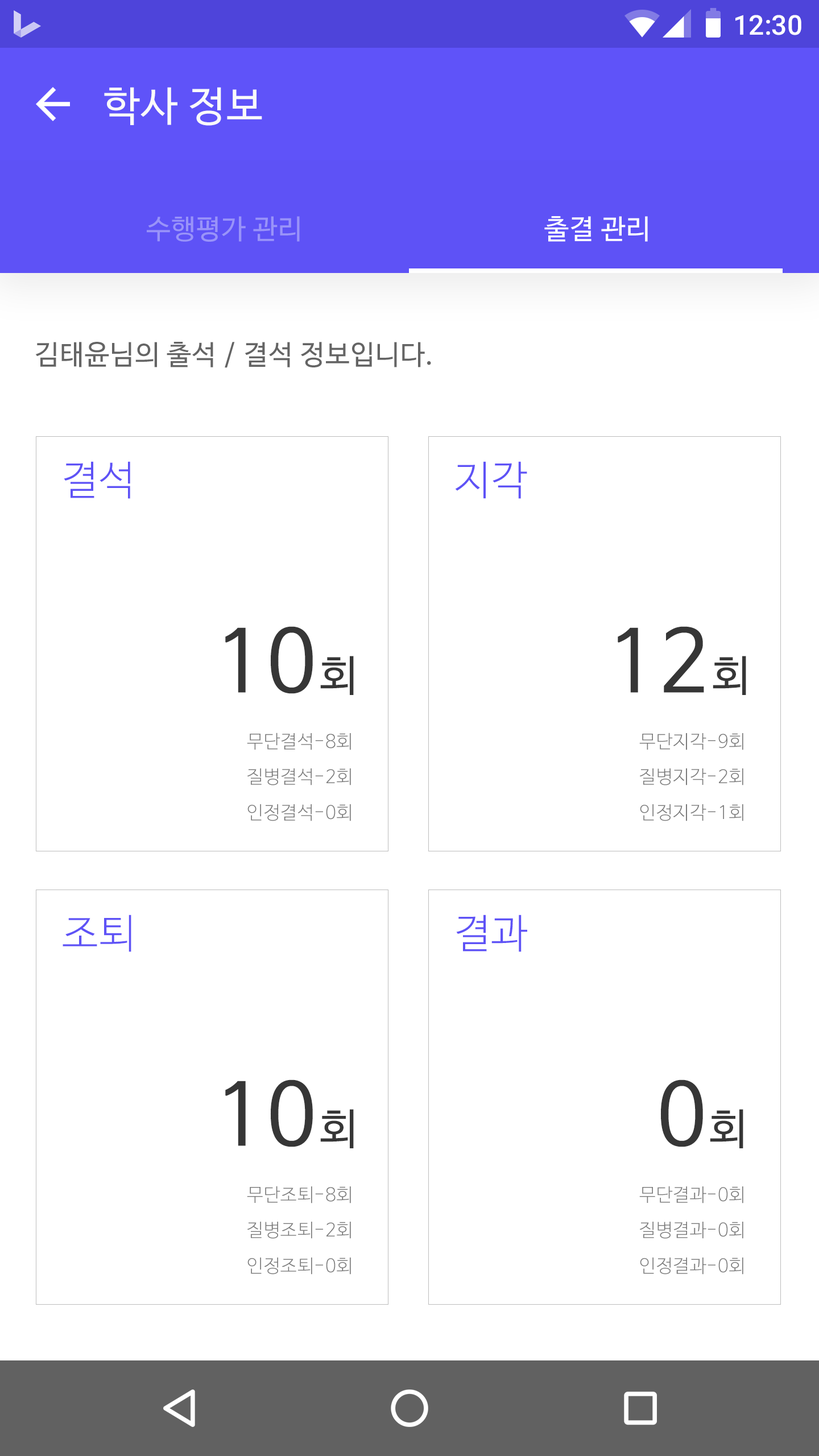
<style>
.page{position:relative;width:819px;height:1456px;background:#ffffff}
.page>*{position:absolute;margin:0}
.t1{font:27.3px "Roboto-Medium";color:#ffffff}
.t2{font:40.9px "NanumBarunGothic";letter-spacing:0.025em;color:#fafafa}
.t3{font:27.3px "NanumBarunGothic";letter-spacing:0.025em;color:#9993f9}
.t4{font:27.3px "NanumBarunGothic";letter-spacing:0.025em;color:#ffffff}
.t5{font:27.3px "NanumBarunGothic";letter-spacing:0.025em;color:#646464}
.t6{font:40.3px "NanumBarunGothicLight";letter-spacing:0.025em;color:#5e52f6}
.t7{font:85.3px "NanumBarunGothic";letter-spacing:0.025em;color:#363636}
.t8{font:42.7px "NanumBarunGothic";letter-spacing:0.025em;color:#363636}
.t9{font:18.3px/11.8px "NanumBarunGothicLight";letter-spacing:0.025em;color:#7b7b7b}
</style>
<div class="page">
<p class="t1" style="left:735px;top:15px;width:66px;height:20px">12:30</p>
<p class="t2" style="left:104px;top:87px;width:158px;height:39px">학사 정보</p>
<p class="t3" style="left:147px;top:216px;width:153px;height:26px">수행평가 관리</p>
<p class="t4" style="left:544px;top:216px;width:104px;height:26px">출결 관리</p>
<p class="t5" style="left:35px;top:342px;width:396px;height:26px">김태윤님의 출석 / 결석 정보입니다.</p>
<p class="t6" style="left:64px;top:461px;width:66px;height:38px">결석</p>
<p class="t6" style="left:455px;top:461px;width:72px;height:38px">지각</p>
<p class="t7" style="left:225px;top:626px;width:129px;height:69px">10<span class="t8">회</span></p>
<p class="t7" style="left:618px;top:626px;width:128px;height:69px">12<span class="t8">회</span></p>
<p class="t9" style="left:247px;top:733px;width:104px;height:88px">무단결석-8회<br><br><br>질병결석-2회<br><br><br>인정결석-0회</p>
<p class="t9" style="left:639px;top:733px;width:104px;height:88px">무단지각-9회<br><br><br>질병지각-2회<br><br><br>인정지각-1회</p>
<p class="t6" style="left:63px;top:915px;width:68px;height:37px">조퇴</p>
<p class="t6" style="left:456px;top:915px;width:71px;height:37px">결과</p>
<p class="t7" style="left:225px;top:1079px;width:129px;height:69px">10<span class="t8">회</span></p>
<p class="t7" style="left:660px;top:1079px;width:83px;height:69px">0<span class="t8">회</span></p>
<p class="t9" style="left:247px;top:1186px;width:104px;height:89px">무단조퇴-8회<br><br><br>질병조퇴-2회<br><br><br>인정조퇴-0회</p>
<p class="t9" style="left:639px;top:1186px;width:104px;height:89px">무단결과-0회<br><br><br>질병결과-0회<br><br><br>인정결과-0회</p>
</div>
